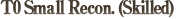
<style>
.page{position:relative;width:177px;height:19px;background:#ffffff}
.page>*{position:absolute;margin:0}
.t1{font:18px "RyuminPro-ExBold";letter-spacing:-0.08em;color:#4a3f32;font-weight:bold;scale:0.9 1}
</style>
<div class="page">
<p class="t1" style="left:0px;top:0px;width:174px;height:18px">T0 Small Recon. (Skilled)</p>
</div>
